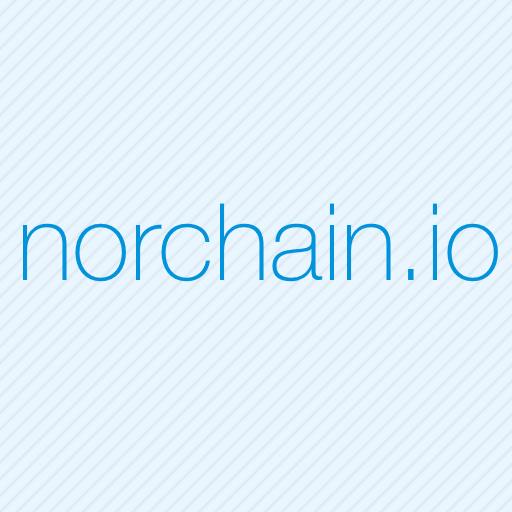
<style>
.page{position:relative;width:512px;height:512px;background:#eaf6ff}
.page>*{position:absolute;margin:0}
.t1{font:107px "HelveticaNeue-Thin";color:#0293db}
</style>
<div class="page">
<p class="t1" style="left:23px;top:203px;width:475px;height:79px">norchain.io</p>
</div>
